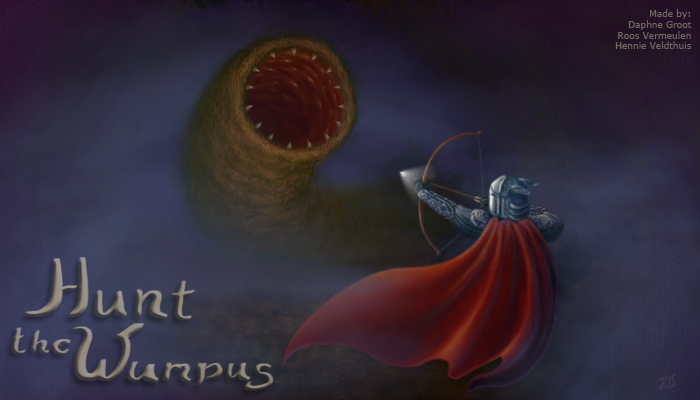
<style>
.page{position:relative;width:700px;height:400px}
.page>*{position:absolute;margin:0}
.t1{font:9px "Verdana";color:#6e6961}
</style>
<div class="page">
<p class="t1" style="left:615px;top:9px;width:77px;height:40px;text-align:right">Made by:<br>Daphne Groot<br>Roos Vermeulen<br>Hennie Veldthuis</p>
</div>
